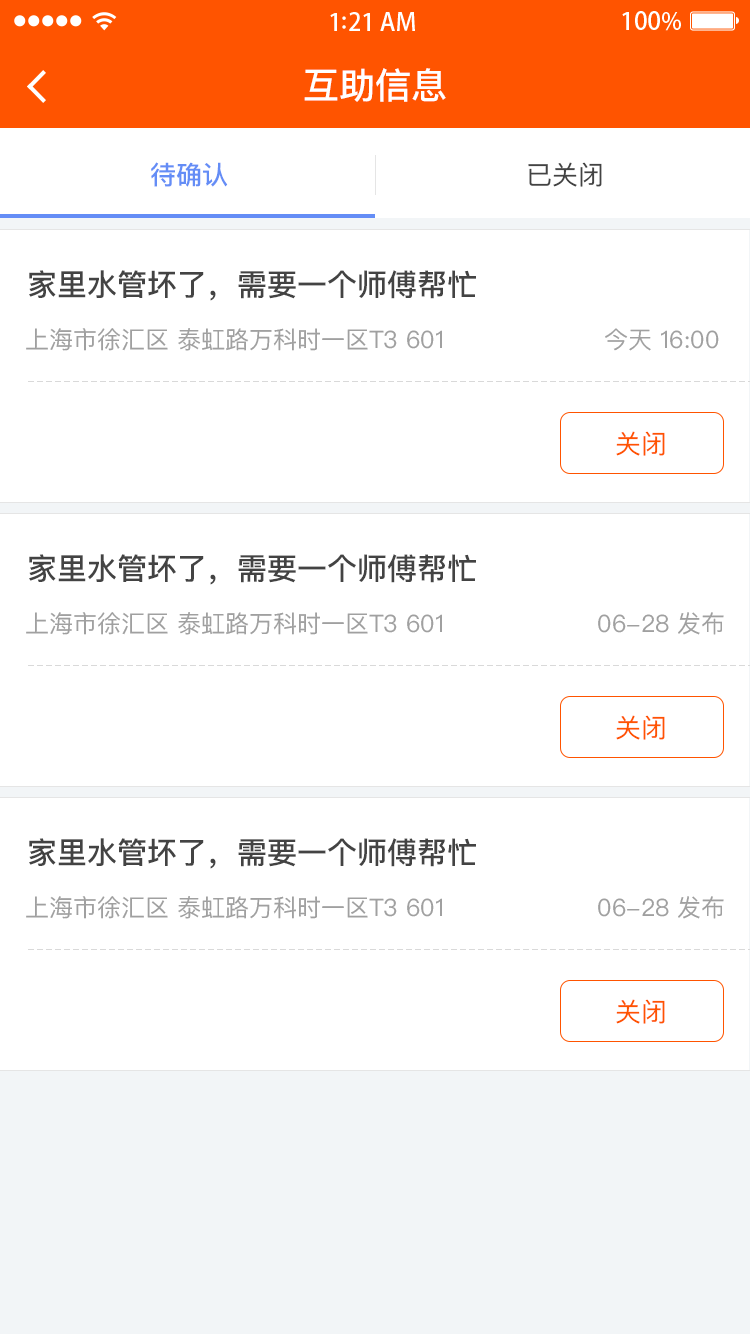
<style>
.page{position:relative;width:750px;height:1334px;background:#ffffff}
.page>*{position:absolute;margin:0}
.t1{font:36px "PingFangSC-Medium";color:#ffffff}
.t2{font:26px "PingFangSC-Medium";color:#648df6}
.t3{font:26px "PingFangSC-Regular";color:#434343}
.t4{font:30px "PingFangSC-Medium";color:#434343}
.t5{font:24px "PingFangSC-Regular";color:#a0a0a0}
.t6{font:26px "PingFangSC-Regular";color:#ff5400}
</style>
<div class="page">
<p class="t1" style="left:304px;top:68px;width:142px;height:34px">互助信息</p>
<p class="t2" style="left:151px;top:162px;width:77px;height:25px">待确认</p>
<p class="t3" style="left:528px;top:162px;width:74px;height:25px">已关闭</p>
<p class="t4" style="left:29px;top:270px;width:447px;height:31px">家里水管坏了，需要一个师傅帮忙</p>
<p class="t5" style="left:26px;top:328px;width:416px;height:23px">上海市徐汇区 泰虹路万科时一区T3 601</p>
<p class="t5" style="left:605px;top:328px;width:114px;height:23px">今天 16:00</p>
<p class="t6" style="left:616px;top:431px;width:49px;height:25px">关闭</p>
<p class="t4" style="left:29px;top:554px;width:447px;height:31px">家里水管坏了，需要一个师傅帮忙</p>
<p class="t5" style="left:26px;top:612px;width:416px;height:23px">上海市徐汇区 泰虹路万科时一区T3 601</p>
<p class="t5" style="left:598px;top:612px;width:126px;height:23px">06-28 发布</p>
<p class="t6" style="left:616px;top:715px;width:49px;height:25px">关闭</p>
<p class="t4" style="left:29px;top:838px;width:447px;height:31px">家里水管坏了，需要一个师傅帮忙</p>
<p class="t5" style="left:26px;top:896px;width:416px;height:23px">上海市徐汇区 泰虹路万科时一区T3 601</p>
<p class="t5" style="left:598px;top:896px;width:126px;height:23px">06-28 发布</p>
<p class="t6" style="left:616px;top:999px;width:49px;height:25px">关闭</p>
</div>
